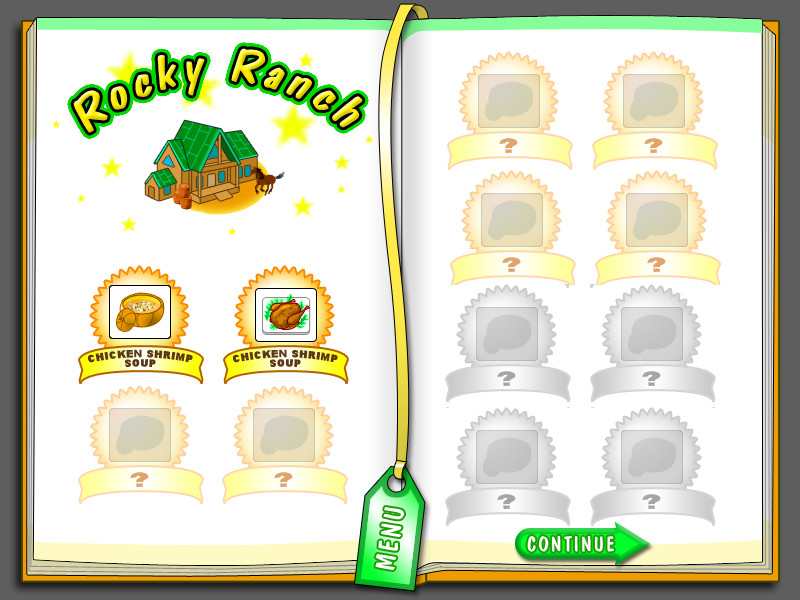
<style>
.page{position:relative;width:800px;height:600px;background:#ffffff}
.page>*{position:absolute;margin:0}
.t1{font:48.9px "DomCasualBT-Regular";letter-spacing:0.095em;font-style:italic}
.t2{font:9.4px/9.4px "Arial-Black";letter-spacing:0.045em;color:#5b3714;text-transform:uppercase}
.t3{font:18.5px "Arial-Black";letter-spacing:0.045em;color:#dfa56c;text-transform:uppercase}
.t4{font:28.1px "DomCasualBT-Regular";letter-spacing:0.09em;color:#ffffff;font-variant:small-caps}
.t5{font:21.1px "DomCasualBT-Regular";letter-spacing:0.09em;color:#ffffff;font-variant:small-caps}
</style>
<div class="page">
<p class="t1" style="left:73px;top:48px;width:290px;height:85px;rotate:-1deg">Rocky Ranch</p>
<p class="t2" style="left:233px;top:349px;width:105px;height:18px;text-align:center">chicken shrimp<br>soup</p>
<p class="t3" style="left:130px;top:472px;width:19px;height:15px">?</p>
<p class="t4" style="left:375px;top:507px;width:29px;height:63px;rotate:-80deg">MENU</p>
<p class="t5" style="left:527px;top:535px;width:87px;height:17px">CONTINUE</p>
</div>
